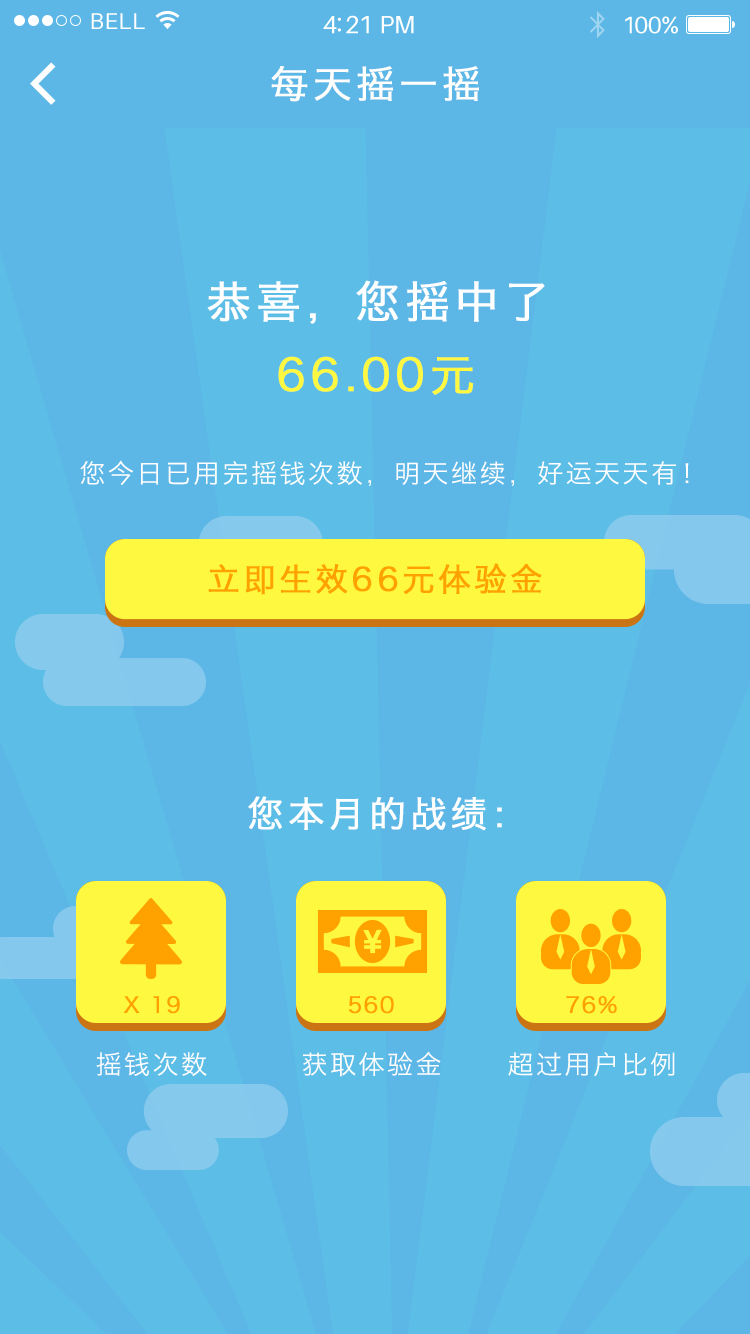
<style>
.page{position:relative;width:750px;height:1334px;background:#5cbee6}
.page>*{position:absolute;margin:0}
.t1{font:23px "Aileron-Regular";letter-spacing:0.02em;color:#ffffff}
.t2{font:25px "Aileron-Regular";letter-spacing:-0.02em;color:#ffffff}
.t3{font:24px "Aileron-Regular";letter-spacing:-0.02em;color:#ffffff}
.t4{font:38px "HiraginoSansGB-W3";letter-spacing:0.1em;color:#fffffe;font-weight:bold}
.t5{font:44px "HiraginoSansGB-W3";letter-spacing:0.1em;color:#ffffff;font-weight:bold}
.t6{font:44px "HiraginoSansGB-W3";letter-spacing:0.1em;color:#fff840;font-weight:bold}
.t7{font:26px "HiraginoSansGB-W3";letter-spacing:0.1em;color:#ffffff}
.t8{font:32px "HiraginoSansGB-W3";letter-spacing:0.1em;color:#ffa200;font-weight:bold}
.t9{font:36px "HiraginoSansGB-W3";letter-spacing:0.1em;color:#ffffff;font-weight:bold}
.t10{font:22px "HiraginoSansGB-W3";letter-spacing:0.05em;color:#ffa200;font-weight:bold}
</style>
<div class="page">
<p class="t1" style="left:91px;top:13px;width:54px;height:16px">BELL</p>
<p class="t2" style="left:323px;top:15px;width:91px;height:19px">4:21 PM</p>
<p class="t3" style="left:625px;top:16px;width:53px;height:18px">100%</p>
<p class="t4" style="left:271px;top:66px;width:208px;height:36px">每天摇一摇</p>
<p class="t5" style="left:207px;top:280px;width:338px;height:44px">恭喜，您摇中了</p>
<p class="t6" style="left:278px;top:356px;width:196px;height:39px">66.00元</p>
<p class="t7" style="left:80px;top:460px;width:609px;height:26px">您今日已用完摇钱次数，明天继续，好运天天有！</p>
<p class="t8" style="left:208px;top:563px;width:334px;height:32px">立即生效66元体验金</p>
<p class="t9" style="left:248px;top:796px;width:254px;height:35px">您本月的战绩：</p>
<p class="t10" style="left:123px;top:996px;width:57px;height:18px">X 19</p>
<p class="t10" style="left:348px;top:996px;width:46px;height:18px">560</p>
<p class="t10" style="left:566px;top:996px;width:51px;height:18px">76%</p>
<p class="t7" style="left:96px;top:1052px;width:111px;height:24px">摇钱次数</p>
<p class="t7" style="left:302px;top:1051px;width:139px;height:26px">获取体验金</p>
<p class="t7" style="left:508px;top:1052px;width:167px;height:25px">超过用户比例</p>
</div>
